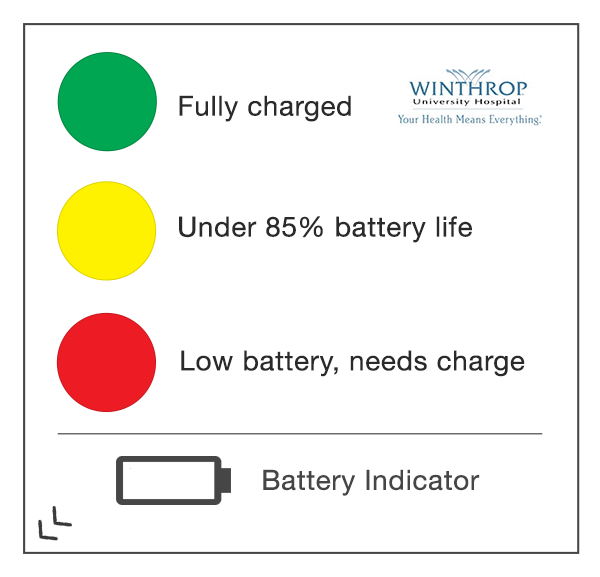
<style>
.page{position:relative;width:600px;height:577px;background:#ffffff}
.page>*{position:absolute;margin:0}
.t1{font:27.7px "HelveticaNeue";color:#2a2a2a;font-weight:bold}
.t2{font:27.7px "HelveticaNeue";color:#464646;font-weight:bold}
</style>
<div class="page">
<p class="t1" style="left:179px;top:95px;width:172px;height:27px">Fully charged</p>
<p class="t1" style="left:179px;top:216px;width:293px;height:27px">Under 85% battery life</p>
<p class="t1" style="left:181px;top:350px;width:344px;height:27px">Low battery, needs charge</p>
<p class="t2" style="left:263px;top:469px;width:217px;height:27px">Battery Indicator</p>
</div>
